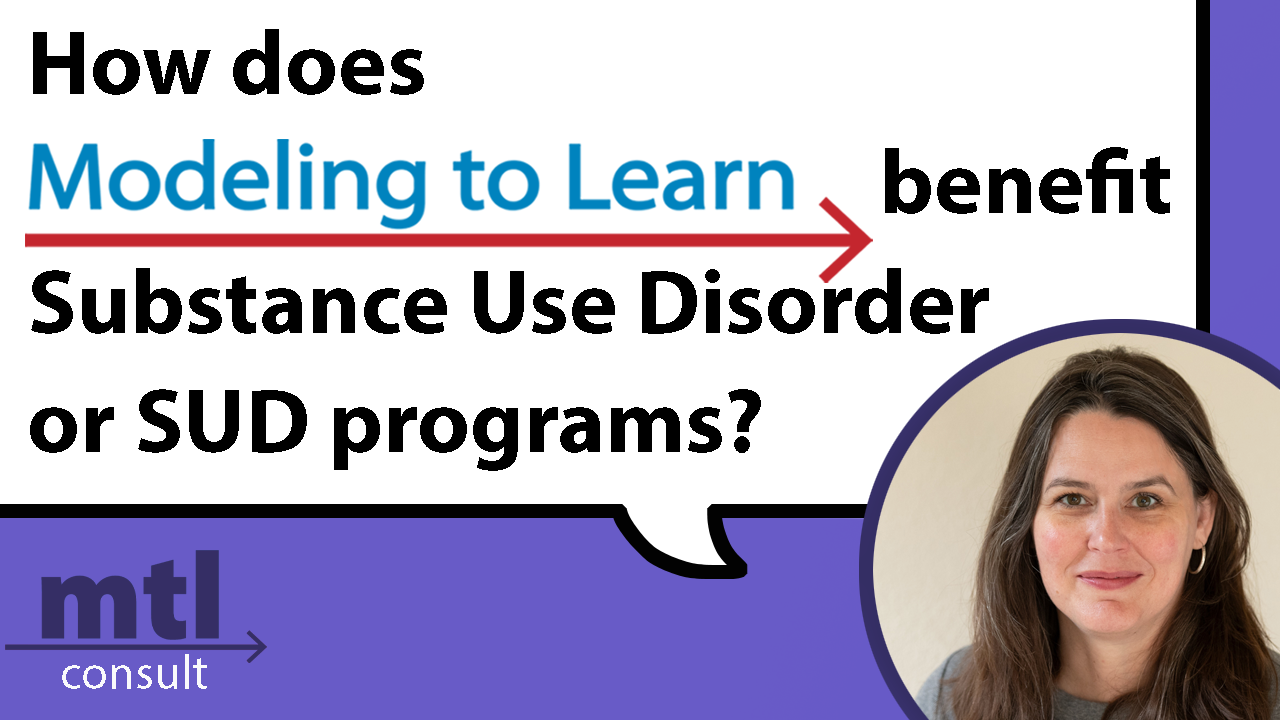
<style>
.page{position:relative;width:1280px;height:720px;background:#ffffff}
.page>*{position:absolute;margin:0}
.t1{font:91.7px/108.3px "MyriadPro-Bold";color:#000000}
</style>
<div class="page">
<p class="t1" style="left:30px;top:29px;width:1140px;height:442px">How does<br>                                              benefit <br>Substance Use Disorder <br>or SUD programs?</p>
</div>
